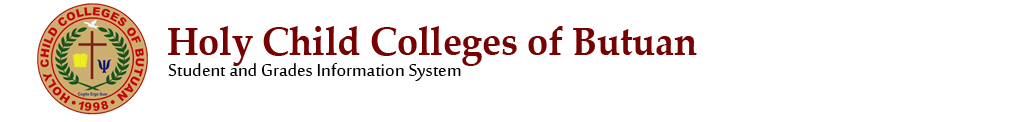
<style>
.page{position:relative;width:1017px;height:122px;background:#ffffff}
.page>*{position:absolute;margin:0}
.t1{font:40px "PalatinoLinotype-Bold";color:#770202;scale:0.94 1}
.t2{font:24px "SakkalMajalla";color:#000000}
</style>
<div class="page">
<p class="t1" style="left:168px;top:26px;width:529px;height:40px">Holy Child Colleges of Butuan</p>
<p class="t2" style="left:168px;top:63px;width:293px;height:18px">Student and Grades Information System</p>
</div>
